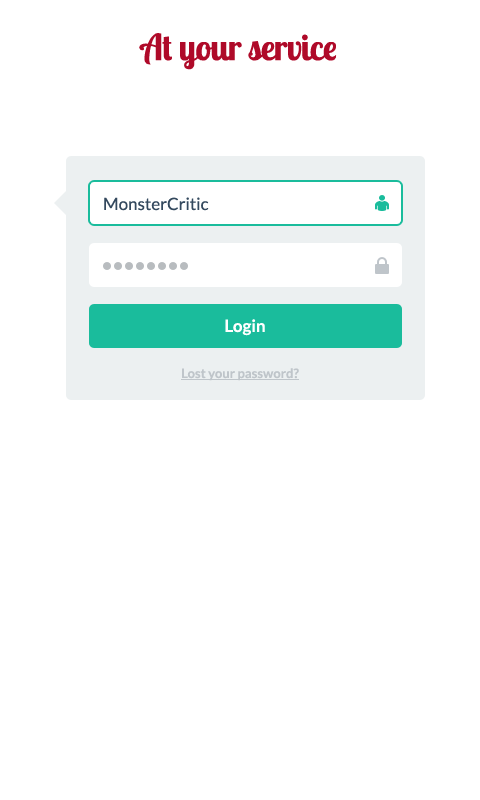
<style>
.page{position:relative;width:480px;height:800px;background:#ffffff}
.page>*{position:absolute;margin:0}
.t1{font:36px "LobsterTwo-Bold";letter-spacing:-0.02em;color:#af0a29}
.t2{font:17px "Lato-Regular";color:#34495e}
.t3{font:17px "Lato-Bold";color:#ffffff}
.t4{font:13px "Lato-Bold";color:#bfc5ca;text-decoration:underline}
</style>
<div class="page">
<p class="t1" style="left:139px;top:33px;width:198px;height:37px">At your service</p>
<p class="t2" style="left:104px;top:197px;width:105px;height:14px">MonsterCritic</p>
<p class="t3" style="left:225px;top:319px;width:40px;height:17px">Login</p>
<p class="t4" style="left:181px;top:368px;width:118px;height:13px">Lost your password?</p>
</div>
